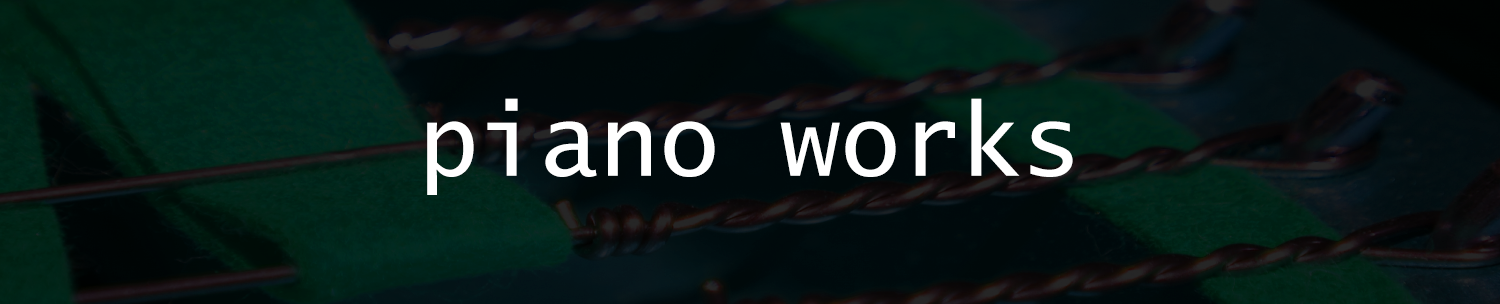
<style>
.page{position:relative;width:1500px;height:304px}
.page>*{position:absolute;margin:0}
.t1{font:100px "LucidaSans-Typewriter";color:#ffffff}
</style>
<div class="page">
<p class="t1" style="left:427px;top:98px;width:646px;height:97px">piano works</p>
</div>
